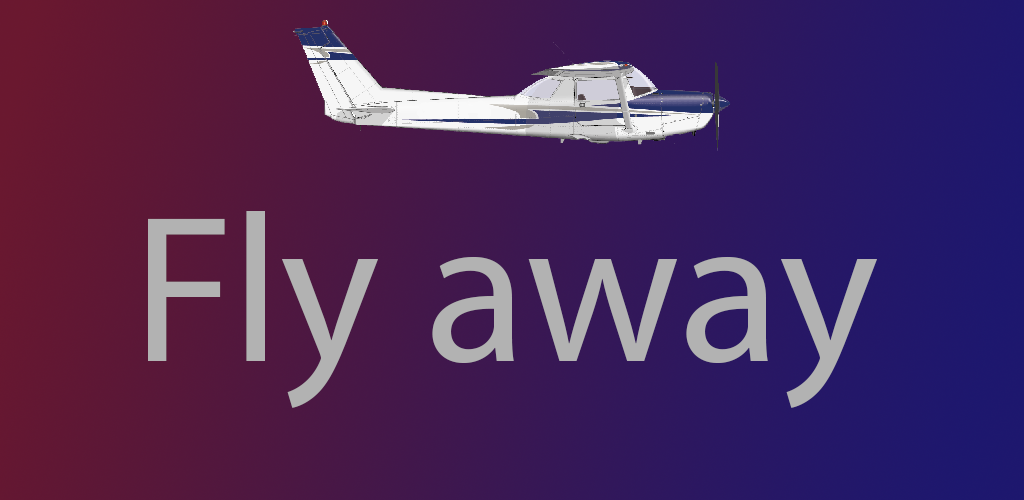
<style>
.page{position:relative;width:1024px;height:500px}
.page>*{position:absolute;margin:0}
.t1{font:211px "MyriadPro-Regular";color:#b2b2b2}
</style>
<div class="page">
<p class="t1" style="left:148px;top:211px;width:729px;height:197px">Fly away</p>
</div>
